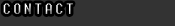
<style>
.page{position:relative;width:175px;height:26px;background:#333333}
.page>*{position:absolute;margin:0}
.t1{font:14px "Terminal";color:#ffffff}
</style>
<div class="page">
<p class="t1" style="left:3px;top:3px;width:70px;height:11px">CONTACT</p>
</div>
